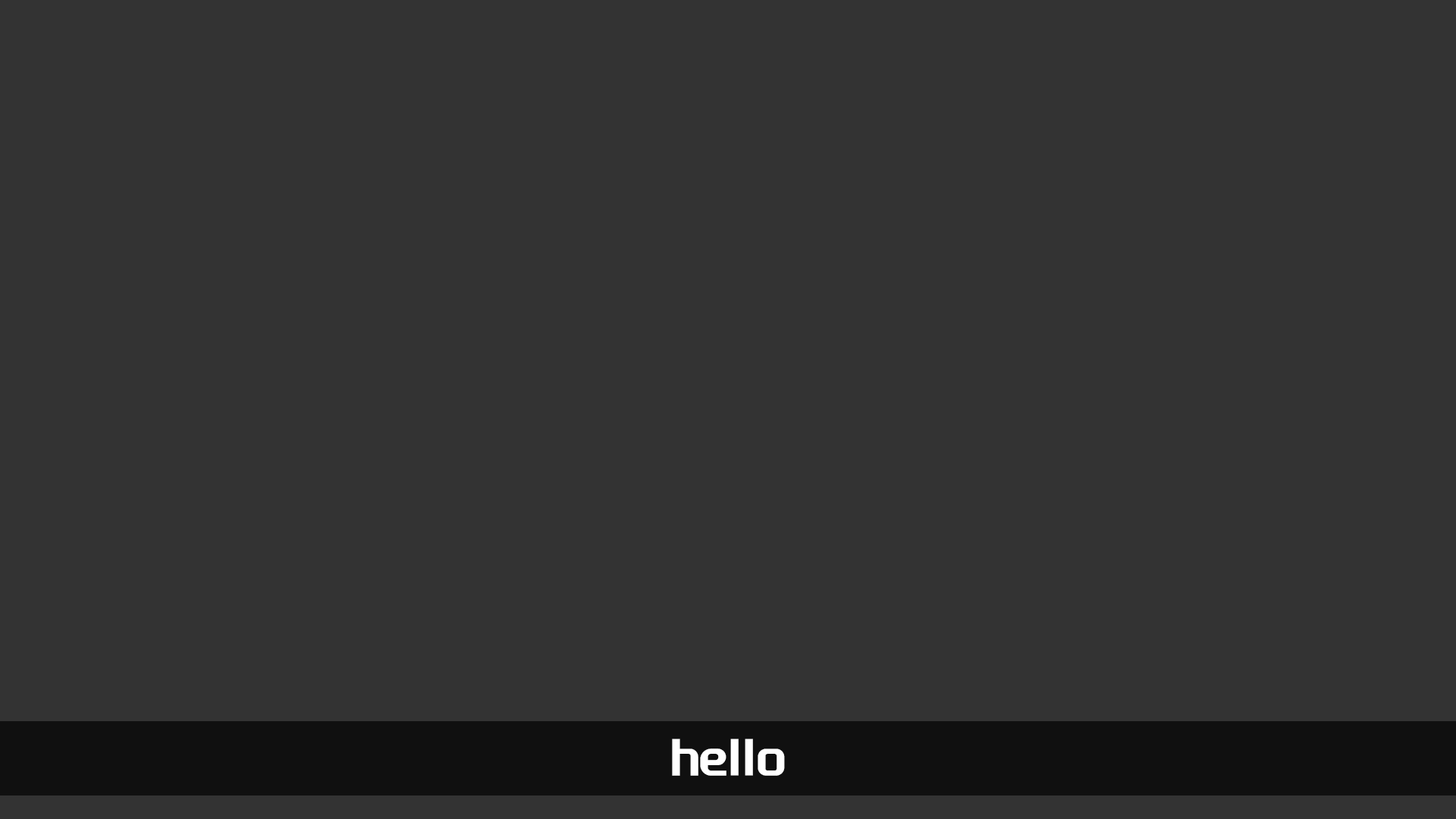
<style>
.page{position:relative;width:1456px;height:819px;background:#333333}
.page>*{position:absolute;margin:0}
.t1{font:54.6px "PangMenZhengDao-3";color:#ffffff}
</style>
<div class="page">
<p class="t1" style="left:672px;top:739px;width:113px;height:37px">hello</p>
</div>
